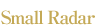
<style>
.page{position:relative;width:108px;height:27px;background:#ffffff}
.page>*{position:absolute;margin:0}
.t1{font:18px "RyuminPro-ExBold";letter-spacing:-0.08em;color:#c4a956}
</style>
<div class="page">
<p class="t1" style="left:1px;top:10px;width:94px;height:15px">Small Radar</p>
</div>
